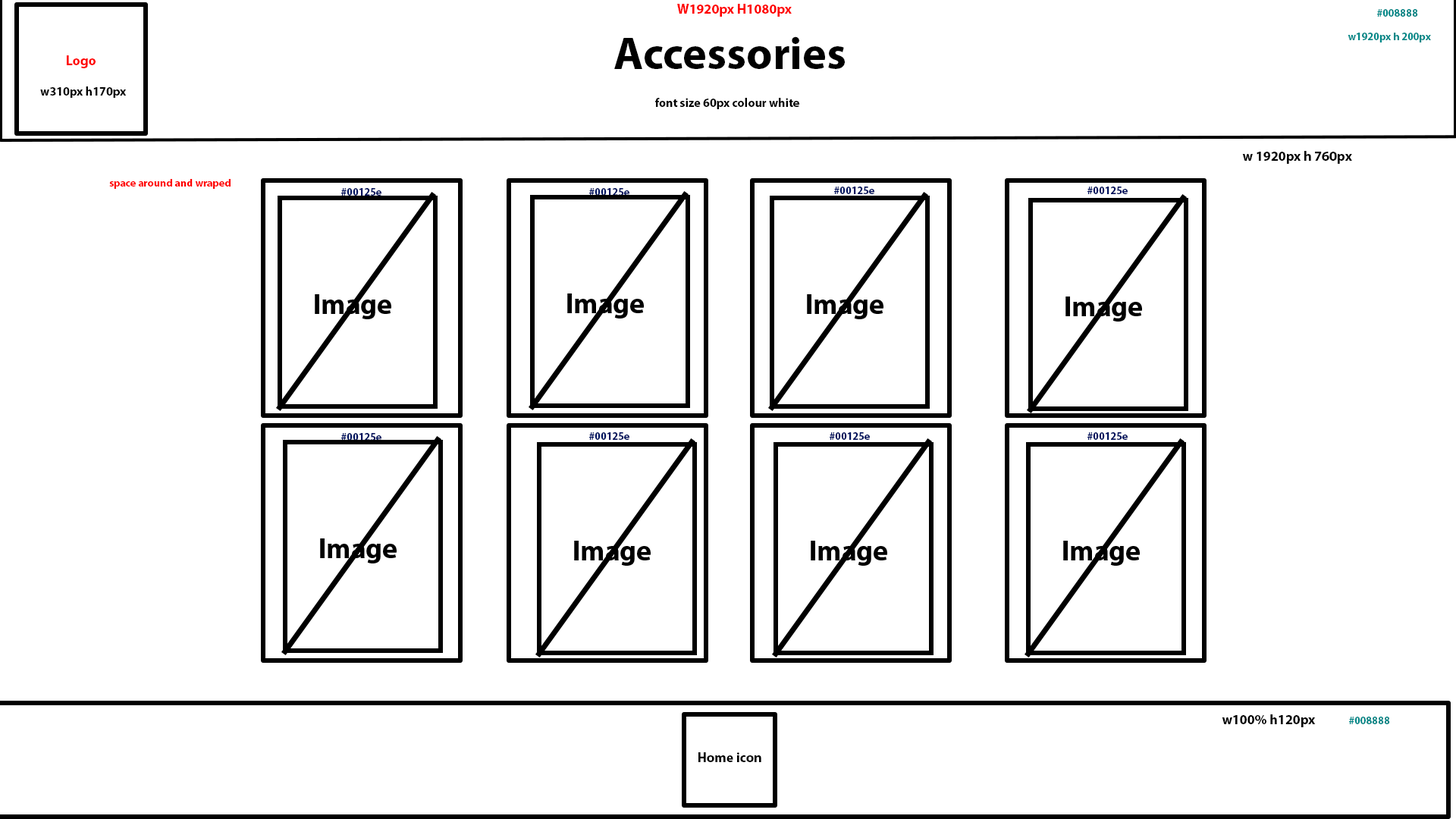
<style>
.page{position:relative;width:1456px;height:819px;background:#ffffff}
.page>*{position:absolute;margin:0}
.t1{font:13.6px "MyriadPro-Bold";color:#ff0000}
.t2{font:10.6px "MyriadPro-Bold";color:#008888}
.t3{font:45.5px "MyriadPro-Bold";color:#000000}
.t4{font:12.1px "MyriadPro-Bold";color:#000000}
.t5{font:13.6px "MyriadPro-Bold";color:#000000}
.t6{font:10.6px "MyriadPro-Bold";color:#ff0000}
.t7{font:10.6px "MyriadPro-Bold";color:#00125e}
</style>
<div class="page">
<p class="t1" style="left:677px;top:4px;width:115px;height:13px">W1920px H1080px</p>
<p class="t2" style="left:1377px;top:9px;width:41px;height:8px">#008888</p>
<p class="t3" style="left:614px;top:36px;width:231px;height:33px">Accessories</p>
<p class="t2" style="left:1348px;top:33px;width:83px;height:9px">w1920px h 200px</p>
<p class="t1" style="left:67px;top:55px;width:29px;height:13px">Logo</p>
<p class="t4" style="left:40px;top:86px;width:87px;height:12px">w310px h170px</p>
<p class="t4" style="left:655px;top:98px;width:144px;height:11px">font size 60px colour white</p>
<p class="t5" style="left:1242px;top:151px;width:110px;height:13px">w 1920px h 760px</p>
<p class="t6" style="left:109px;top:179px;width:122px;height:10px">space around and wraped</p>
<p class="t7" style="left:341px;top:188px;width:40px;height:8px">#00125e</p>
<p class="t7" style="left:589px;top:188px;width:40px;height:8px">#00125e</p>
<p class="t7" style="left:834px;top:187px;width:40px;height:7px">#00125e</p>
<p class="t7" style="left:1087px;top:187px;width:41px;height:7px">#00125e</p>
<p class="t7" style="left:341px;top:433px;width:40px;height:8px">#00125e</p>
<p class="t7" style="left:589px;top:432px;width:40px;height:8px">#00125e</p>
<p class="t7" style="left:830px;top:432px;width:40px;height:8px">#00125e</p>
<p class="t7" style="left:1087px;top:432px;width:41px;height:8px">#00125e</p>
<p class="t5" style="left:1222px;top:714px;width:94px;height:13px">w100% h120px</p>
<p class="t2" style="left:1349px;top:717px;width:41px;height:7px">#008888</p>
<p class="t5" style="left:698px;top:752px;width:63px;height:10px">Home icon</p>
</div>
